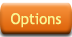
<style>
.page{position:relative;width:72px;height:37px}
.page>*{position:absolute;margin:0}
.t1{font:15px "TrebuchetMS";color:#f9f592}
</style>
<div class="page">
<p class="t1" style="left:11px;top:13px;width:51px;height:15px">Options</p>
</div>
